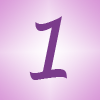
<style>
.page{position:relative;width:100px;height:100px}
.page>*{position:absolute;margin:0}
.t1{font:83.3px "LucidaHandwriting-Italic";color:#7b3b8b}
</style>
<div class="page">
<p class="t1" style="left:29px;top:16px;width:38px;height:64px">1</p>
</div>
